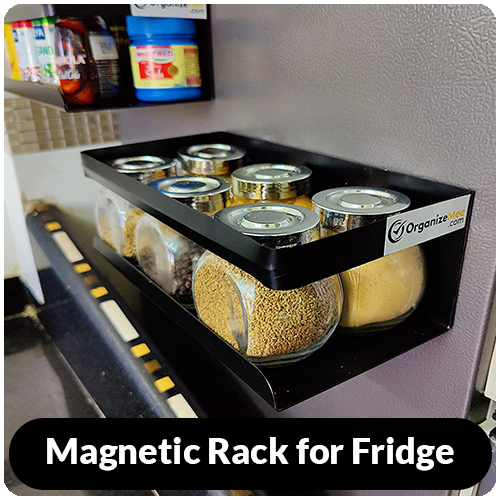
<style>
.page{position:relative;width:500px;height:500px}
.page>*{position:absolute;margin:0}
.t1{font:36px "Lato-Black";color:#ffffff}
</style>
<div class="page">
<p class="t1" style="left:47px;top:437px;width:407px;height:34px">Magnetic Rack for Fridge</p>
</div>
